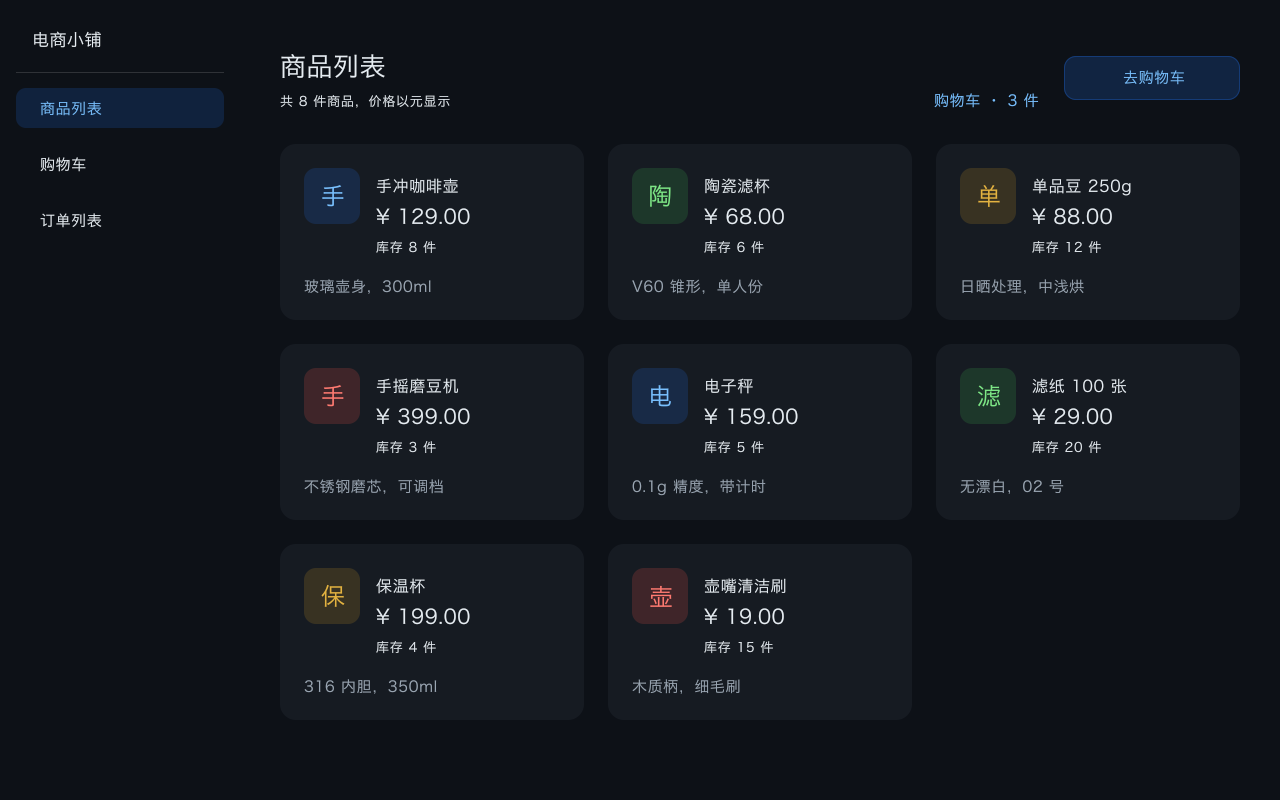
<style>
.page{position:relative;width:1280px;height:800px;background:#0d1117}
.page>*{position:absolute;margin:0}
.t1{font:17px "HiraginoSansGB-Regular";letter-spacing:0.03em;color:#e6edf3}
.t2{font:26px "HiraginoSansGB-Regular";letter-spacing:0.02em;color:#e6edf3}
.t3{font:15px "HiraginoSansGB-Regular";letter-spacing:0.04em;color:#79c0ff}
.t4{font:13px "HiraginoSansGB-Regular";letter-spacing:0.06em;color:#e6edf3}
.t5{font:15px "HiraginoSansGB-Regular";letter-spacing:0.04em;color:#e6edf3}
.t6{font:24px "HiraginoSansGB-Regular";letter-spacing:0.022em;color:#79c0ff}
.t7{font:16px "HiraginoSansGB-Regular";letter-spacing:0.04em;color:#e6edf3}
.t8{font:24px "HiraginoSansGB-Regular";letter-spacing:0.022em;color:#7ee787}
.t9{font:24px "HiraginoSansGB-Regular";letter-spacing:0.022em;color:#e3b341}
.t10{font:20px "HiraginoSansGB-Regular";letter-spacing:0.024em;color:#e6edf3}
.t11{font:15px "HiraginoSansGB-Regular";letter-spacing:0.04em;color:#9ba7b4}
.t12{font:24px "HiraginoSansGB-Regular";letter-spacing:0.022em;color:#ff7b72}
</style>
<div class="page">
<p class="t1" style="left:33px;top:31px;width:69px;height:18px">电商小铺</p>
<p class="t2" style="left:280px;top:54px;width:106px;height:25px">商品列表</p>
<p class="t3" style="left:1122px;top:70px;width:63px;height:16px">去购物车</p>
<p class="t3" style="left:39px;top:101px;width:64px;height:16px">商品列表</p>
<p class="t4" style="left:279px;top:95px;width:172px;height:14px">共 8 件商品，价格以元显示</p>
<p class="t3" style="left:933px;top:93px;width:107px;height:16px">购物车 · 3 件</p>
<p class="t5" style="left:39px;top:157px;width:48px;height:16px">购物车</p>
<p class="t6" style="left:321px;top:185px;width:24px;height:23px">手</p>
<p class="t7" style="left:375px;top:178px;width:84px;height:17px">手冲咖啡壶</p>
<p class="t8" style="left:649px;top:184px;width:23px;height:24px">陶</p>
<p class="t7" style="left:704px;top:178px;width:67px;height:17px">陶瓷滤杯</p>
<p class="t9" style="left:977px;top:185px;width:24px;height:22px">单</p>
<p class="t7" style="left:1031px;top:178px;width:101px;height:19px">单品豆 250g</p>
<p class="t10" style="left:375px;top:208px;width:96px;height:18px">¥ 129.00</p>
<p class="t10" style="left:703px;top:208px;width:82px;height:18px">¥ 68.00</p>
<p class="t10" style="left:1031px;top:208px;width:82px;height:18px">¥ 88.00</p>
<p class="t5" style="left:39px;top:213px;width:64px;height:16px">订单列表</p>
<p class="t4" style="left:375px;top:240px;width:62px;height:15px">库存 8 件</p>
<p class="t4" style="left:703px;top:240px;width:62px;height:15px">库存 6 件</p>
<p class="t4" style="left:1031px;top:240px;width:71px;height:15px">库存 12 件</p>
<p class="t11" style="left:303px;top:279px;width:129px;height:16px">玻璃壶身，300ml</p>
<p class="t11" style="left:631px;top:279px;width:133px;height:16px">V60 锥形，单人份</p>
<p class="t11" style="left:961px;top:279px;width:124px;height:16px">日晒处理，中浅烘</p>
<p class="t12" style="left:321px;top:385px;width:24px;height:23px">手</p>
<p class="t7" style="left:375px;top:378px;width:85px;height:17px">手摇磨豆机</p>
<p class="t6" style="left:650px;top:385px;width:22px;height:23px">电</p>
<p class="t7" style="left:705px;top:378px;width:49px;height:17px">电子秤</p>
<p class="t8" style="left:976px;top:385px;width:26px;height:23px">滤</p>
<p class="t7" style="left:1031px;top:378px;width:97px;height:17px">滤纸 100 张</p>
<p class="t10" style="left:375px;top:408px;width:96px;height:18px">¥ 399.00</p>
<p class="t10" style="left:703px;top:408px;width:96px;height:18px">¥ 159.00</p>
<p class="t10" style="left:1031px;top:408px;width:82px;height:18px">¥ 29.00</p>
<p class="t4" style="left:375px;top:440px;width:62px;height:15px">库存 3 件</p>
<p class="t4" style="left:703px;top:440px;width:62px;height:15px">库存 5 件</p>
<p class="t4" style="left:1031px;top:440px;width:71px;height:15px">库存 20 件</p>
<p class="t11" style="left:303px;top:479px;width:141px;height:16px">不锈钢磨芯，可调档</p>
<p class="t11" style="left:631px;top:479px;width:136px;height:18px">0.1g 精度，带计时</p>
<p class="t11" style="left:959px;top:479px;width:106px;height:16px">无漂白，02 号</p>
<p class="t7" style="left:375px;top:578px;width:51px;height:17px">保温杯</p>
<p class="t7" style="left:703px;top:578px;width:84px;height:17px">壶嘴清洁刷</p>
<p class="t9" style="left:320px;top:584px;width:26px;height:24px">保</p>
<p class="t12" style="left:649px;top:585px;width:24px;height:22px">壶</p>
<p class="t10" style="left:375px;top:608px;width:96px;height:18px">¥ 199.00</p>
<p class="t10" style="left:703px;top:608px;width:82px;height:18px">¥ 19.00</p>
<p class="t4" style="left:375px;top:640px;width:62px;height:14px">库存 4 件</p>
<p class="t4" style="left:703px;top:640px;width:71px;height:15px">库存 15 件</p>
<p class="t11" style="left:303px;top:679px;width:135px;height:16px">316 内胆，350ml</p>
<p class="t11" style="left:631px;top:679px;width:110px;height:16px">木质柄，细毛刷</p>
</div>
